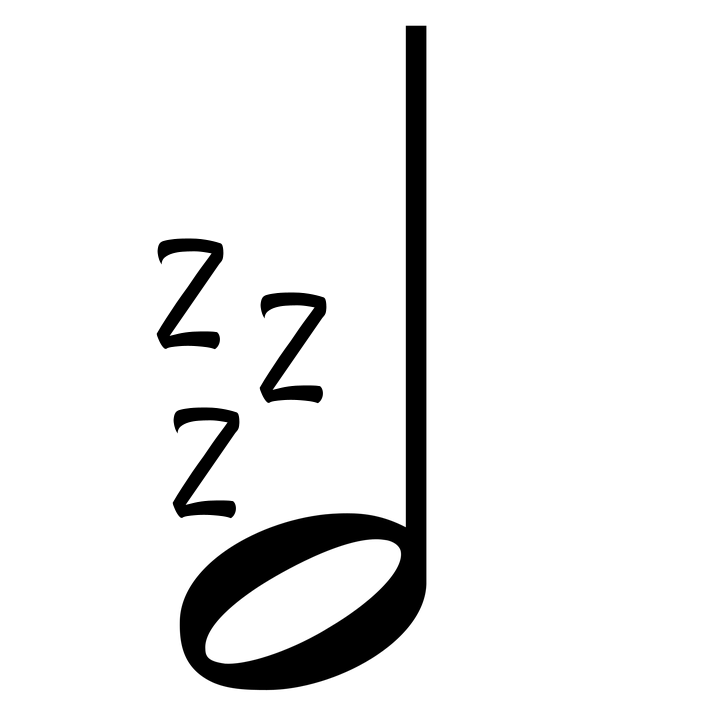
<style>
.page{position:relative;width:720px;height:720px;background:#ffffff}
.page>*{position:absolute;margin:0}
.t1{font:150px "Rancho-Regular";color:#000000}
</style>
<div class="page">
<p class="t1" style="left:156px;top:238px;width:68px;height:112px">Z</p>
<p class="t1" style="left:259px;top:292px;width:68px;height:112px">Z</p>
<p class="t1" style="left:172px;top:407px;width:68px;height:112px">Z</p>
</div>
